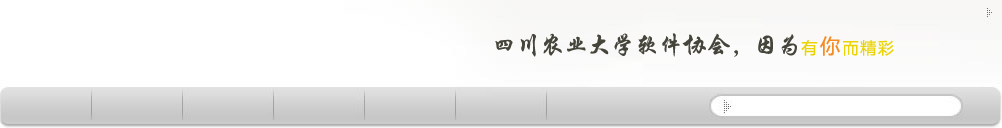
<style>
.page{position:relative;width:1002px;height:128px;background:#ffffff}
.page>*{position:absolute;margin:0}
.t1{font:24px "FZXKJW--GB1-0";letter-spacing:-0.01em;color:#45453b}
.t2{font:16px "MicrosoftYaHei";letter-spacing:0.1em;color:#ead405}
.t3{font:20px "MicrosoftYaHei";letter-spacing:0.2em;color:#f38c23}
</style>
<div class="page">
<p class="t1" style="left:495px;top:33px;width:399px;height:24px">四川农业大学软件协会，因为<span class="t2">有   而精彩</span></p>
<p class="t3" style="left:820px;top:36px;width:20px;height:20px">你</p>
</div>
